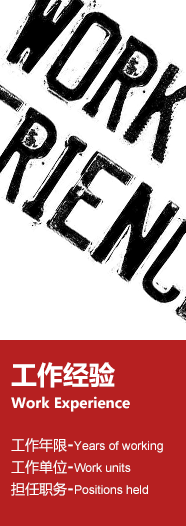
<style>
.page{position:relative;width:186px;height:526px;background:#ffffff}
.page>*{position:absolute;margin:0}
.t1{font:14px/24px "MicrosoftYaHei-Bold";color:#ffffff}
.t2{font:26px/24px "MicrosoftYaHei-Bold";color:#ffffff}
.t3{font:12px/22px "ArialMT";color:#ffffff}
.t4{font:14px/22px "MicrosoftYaHei";color:#ffffff}
.t5{font:16px/22px "MicrosoftYaHei-Bold";color:#ffffff}
</style>
<div class="page">
<p class="t1" style="left:11px;top:362px;width:119px;height:50px"><span class="t2">工作经验<br></span>Work Experience</p>
<p class="t3" style="left:11px;top:438px;width:152px;height:58px"><span class="t4">工作年限</span><span class="t5">-</span>Years of working<br><span class="t4">工作单位</span><span class="t5">-</span>Work units<br><span class="t4">担任职务</span><span class="t5">-</span>Positions held</p>
</div>
